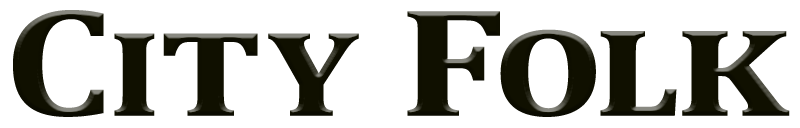
<style>
.page{position:relative;width:800px;height:128px;background:#ffffff}
.page>*{position:absolute;margin:0}
.t1{font:156.5px "Cambria-Bold";letter-spacing:-0.02em;color:#101000;font-variant:small-caps;scale:1.2 1}
.t2{font:156.5px "Cambria-Bold";letter-spacing:-0.02em;color:#101000;font-variant:small-caps;scale:1.04 1}
.t3{font:156.5px "Cambria-Bold";color:#101000;font-variant:small-caps;scale:1.17 1}
.t4{font:156.5px "Cambria-Bold";letter-spacing:-0.02em;color:#101000;font-variant:small-caps;scale:1.07 1}
.t5{font:156.5px "Cambria-Bold";letter-spacing:-0.03em;color:#101000;font-variant:small-caps;scale:1.25 1}
.t6{font:161.3px "Cambria-Bold";letter-spacing:-0.04em;color:#101000;font-variant:small-caps;scale:1.14 1}
.t7{font:161.3px "Cambria-Bold";letter-spacing:-0.04em;color:#101000;font-variant:small-caps;scale:1.13 1}
.t8{font:161.3px "Cambria-Bold";letter-spacing:0.04em;color:#101000;font-variant:small-caps;scale:1.15 1}
</style>
<div class="page">
<p class="t1" style="left:13px;top:10px;width:777px;height:107px">C<span class="t2">i</span><span class="t3">t</span><span class="t4">y </span><span class="t5">F</span><span class="t6">o</span><span class="t7">l</span><span class="t8">k</span></p>
</div>
